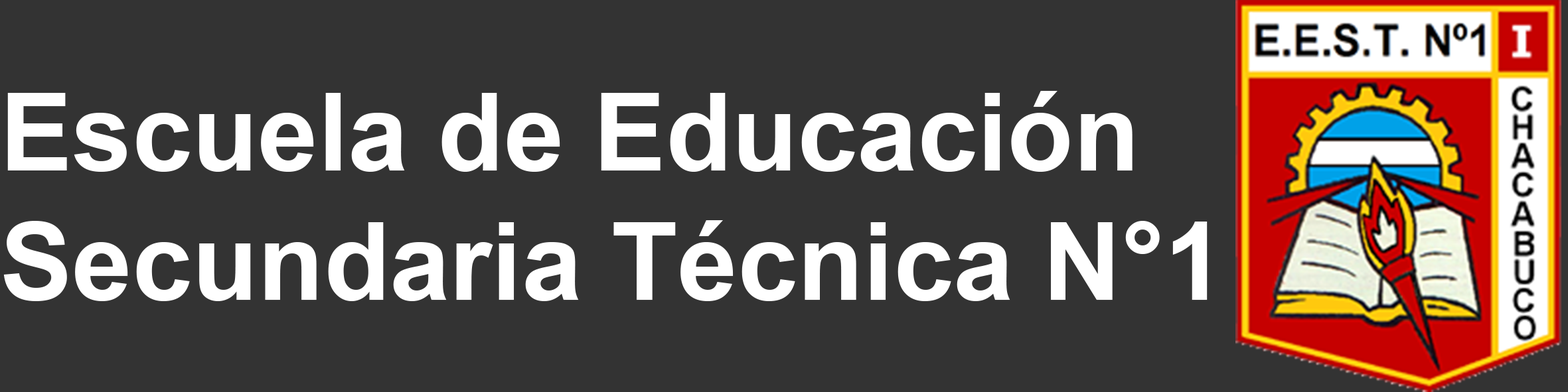
<style>
.page{position:relative;width:1568px;height:392px;background:#333333}
.page>*{position:absolute;margin:0}
.t1{font:107.9px "Arial-BoldMT";color:#ffffff}
</style>
<div class="page">
<p class="t1" style="left:3px;top:91px;width:1205px;height:210px">Escuela de Educación<br>Secundaria Técnica N°1</p>
</div>
